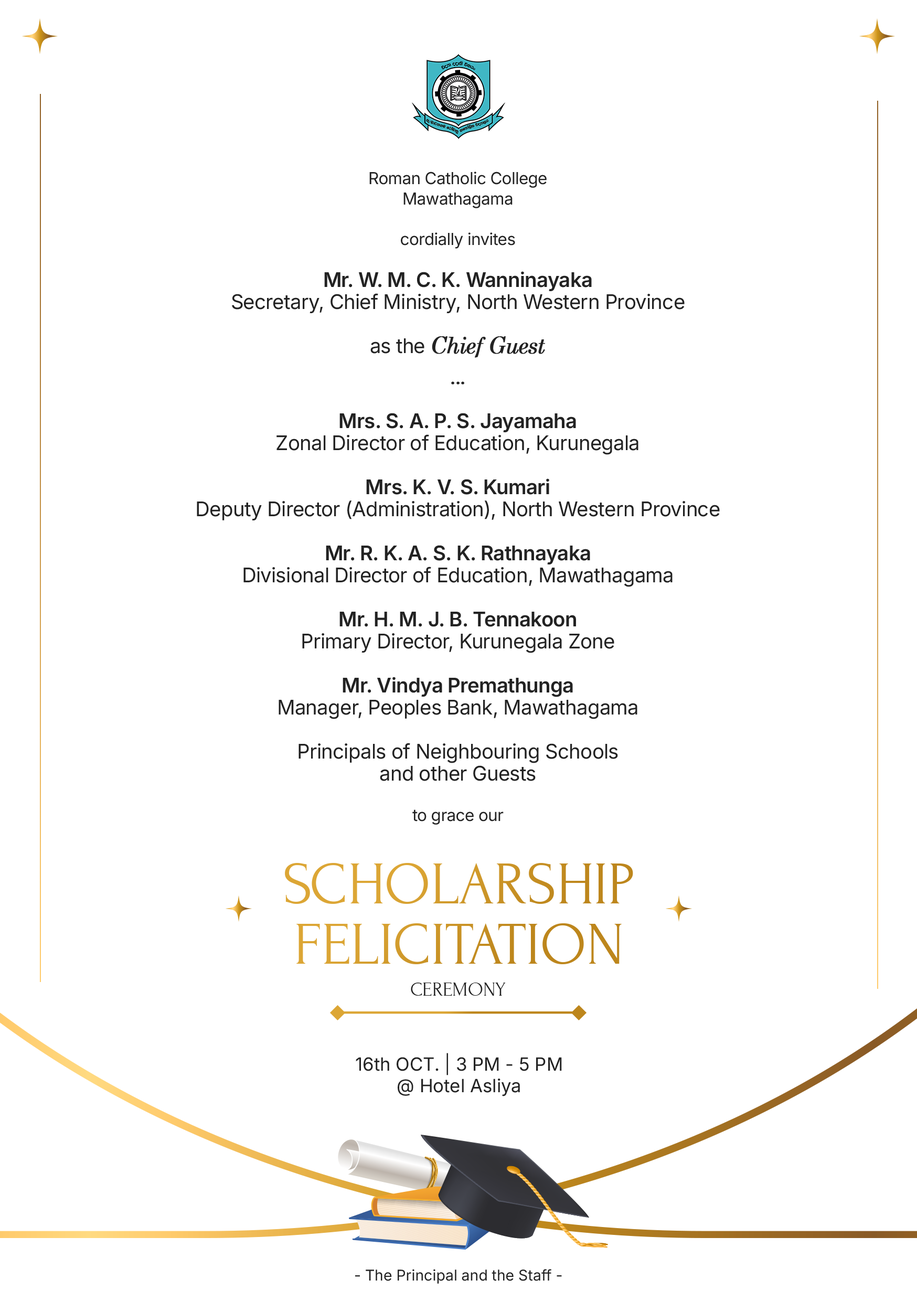
<style>
.page{position:relative;width:917px;height:1301px;background:#ffffff}
.page>*{position:absolute;margin:0}
.t1{font:20.2px/22px "Inter-Regular";letter-spacing:-0.02em;color:#222222}
.t2{font:16.5px/20.2px "Inter-Regular";letter-spacing:-0.02em;color:#222222}
.t3{font:20.2px/22px "Inter-SemiBold";letter-spacing:-0.02em;color:#222222}
.t4{font:22px/22px "CenturySchoolbook-Italic";letter-spacing:-0.04em;color:#222222;font-weight:bold}
.t5{font:23.8px/31.2px "Forum";letter-spacing:-0.02em;color:#222222;font-weight:bold}
.t6{font:60.3px/60.3px "Forum";color:#cb9427}
.t7{font:19.9px "Forum";color:#222222}
.t8{font:18.2px "Inter-ExtraBold";color:#222222}
.t9{font:14.9px "Inter-ExtraBold";color:#222222}
</style>
<div class="page">
<p class="t1" style="left:197px;top:172px;width:523px;height:652px;text-align:center"><span class="t2">Roman Catholic College<br>Mawathagama<br><br>cordially invites<br><br></span><span class="t3">Mr. W. M. C. K. Wanninayaka<br></span>Secretary, Chief Ministry, North Western Province<br><br>as the <span class="t4">Chief Guest<br></span><span class="t5">...<br><br></span><span class="t3">Mrs. S. A. P. S. Jayamaha<br></span>Zonal Director of Education, Kurunegala<br><span class="t3"><br>Mrs. K. V. S. Kumari<br></span>Deputy Director (Administration), North Western Province<br><span class="t3"><br>Mr. R. K. A. S. K. Rathnayaka<br></span>Divisional Director of Education, Mawathagama<br><br><span class="t3">Mr. H. M. J. B. Tennakoon<br></span>Primary Director, Kurunegala Zone<br><br><span class="t3">Mr. Vindya Premathunga<br></span>Manager, Peoples Bank, Mawathagama<br><br>Principals of Neighbouring Schools<br>and other Guests<br><br><span class="t2">to grace our</span></p>
<p class="t6" style="left:285px;top:863px;width:348px;height:101px;text-align:center">SCHOLARSHIP<br>FELICITATION</p>
<p class="t7" style="left:411px;top:982px;width:95px;height:13px">CEREMONY</p>
<p class="t8" style="left:356px;top:1053px;width:206px;height:43px;text-align:center">16th OCT. | 3 PM - 5 PM<br>@ Hotel Asliya</p>
<p class="t9" style="left:355px;top:1269px;width:207px;height:14px">- The Principal and the Staff -</p>
</div>
